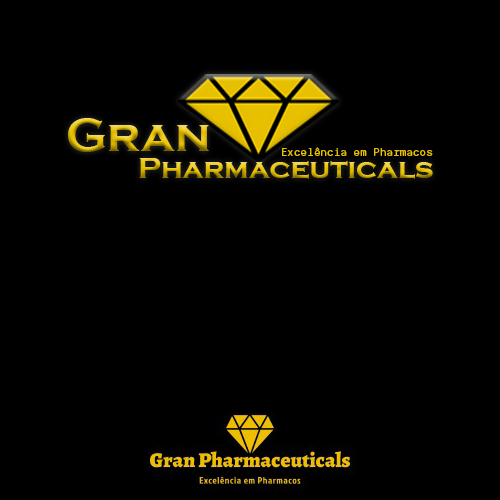
<style>
.page{position:relative;width:500px;height:500px;background:#000000}
.page>*{position:absolute;margin:0}
.t1{font:48px "CopperplateGothic-Bold"}
.t2{font:12px "DankMono-Regular";color:#e7c100}
.t3{font:30px "CopperplateGothic-Bold"}
</style>
<div class="page">
<p class="t1" style="left:68px;top:118px;width:141px;height:34px">Gran</p>
<p class="t2" style="left:282px;top:147px;width:151px;height:9px">Excelência em Pharmacos</p>
<p class="t3" style="left:139px;top:158px;width:294px;height:21px">Pharmaceuticals</p>
</div>
